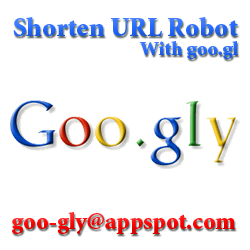
<style>
.page{position:relative;width:250px;height:250px;background:#ffffff}
.page>*{position:absolute;margin:0}
.t1{font:27px "MinionStd-Black";color:#2367ff}
.t2{font:20px "MinionStd-Black";color:#2367ff}
.t3{font:24px "MinionStd-Black";color:#ff0101}
</style>
<div class="page">
<p class="t1" style="left:13px;top:17px;width:225px;height:19px">Shorten URL Robot</p>
<p class="t2" style="left:139px;top:41px;width:99px;height:18px">With goo.gl</p>
<p class="t3" style="left:12px;top:212px;width:224px;height:22px">goo-gly@appspot.com</p>
</div>
